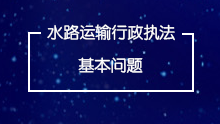
<style>
.page{position:relative;width:220px;height:124px}
.page>*{position:absolute;margin:0}
.t1{font:16px "FZY3JW--GB1-0";color:#ffffff}
</style>
<div class="page">
<p class="t1" style="left:47px;top:24px;width:128px;height:17px">水路运输行政执法</p>
<p class="t1" style="left:78px;top:57px;width:65px;height:16px">基本问题</p>
</div>
